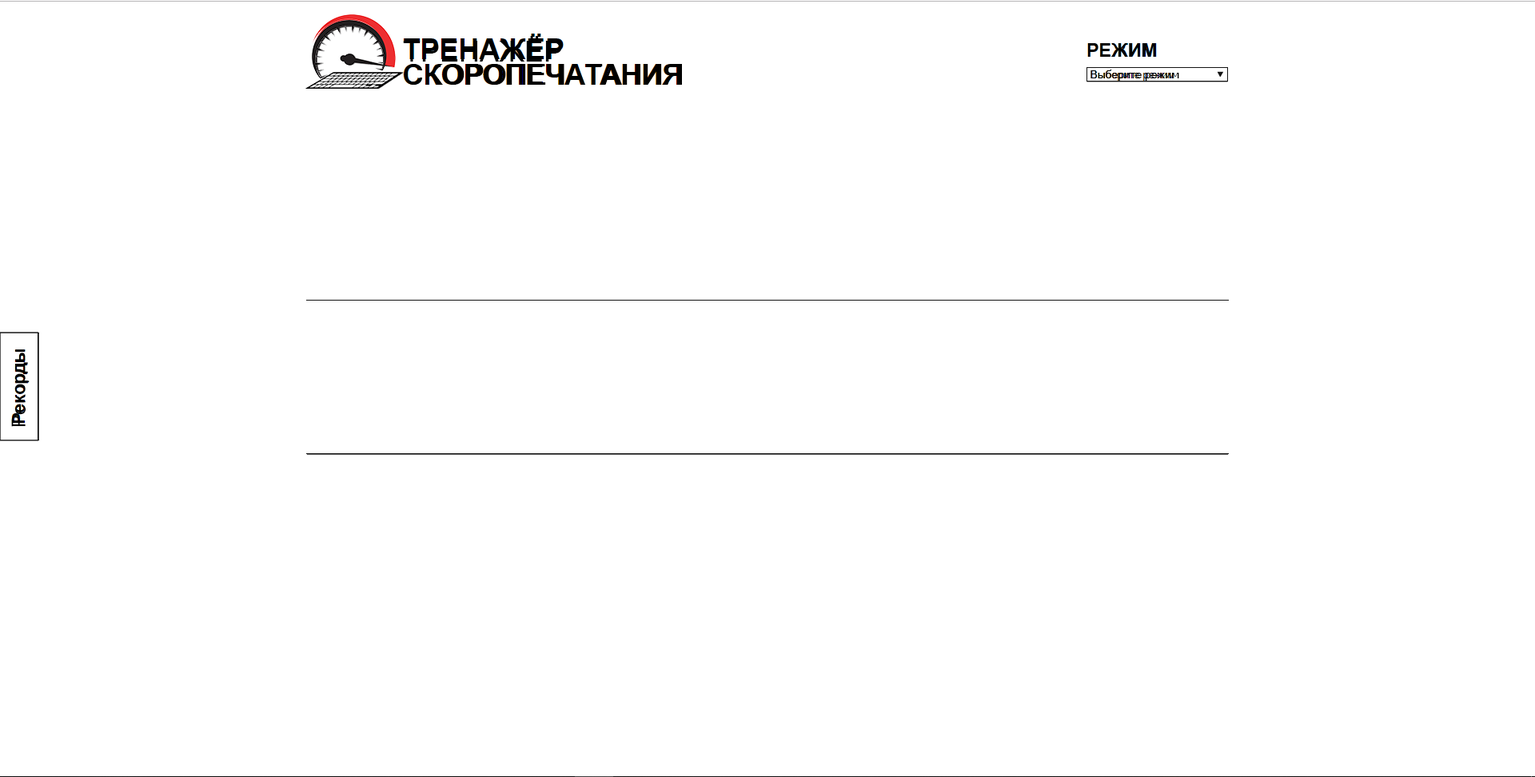
<style>
.page{position:relative;width:1535px;height:777px;background:#ffffff}
.page>*{position:absolute;margin:0}
.t1{font:28.8px "MicrosoftSansSerif";color:#000000;text-transform:uppercase}
.t2{font:18.4px "MicrosoftSansSerif";color:#000000;text-transform:uppercase}
.t3{font:11.2px "MicrosoftSansSerif";color:#000000}
.t4{font:19.2px "MicrosoftSansSerif";color:#000000}
</style>
<div class="page">
<p class="t1" style="left:403px;top:36px;width:279px;height:49px">ТРЕНАЖЁР СКОРОПЕЧАТАНИЯ</p>
<p class="t2" style="left:1088px;top:43px;width:67px;height:14px">режим</p>
<p class="t3" style="left:1090px;top:70px;width:89px;height:11px">Выберите режим</p>
<p class="t4" style="left:11px;top:349px;width:19px;height:78px;rotate:-90deg">Рекорды</p>
</div>
